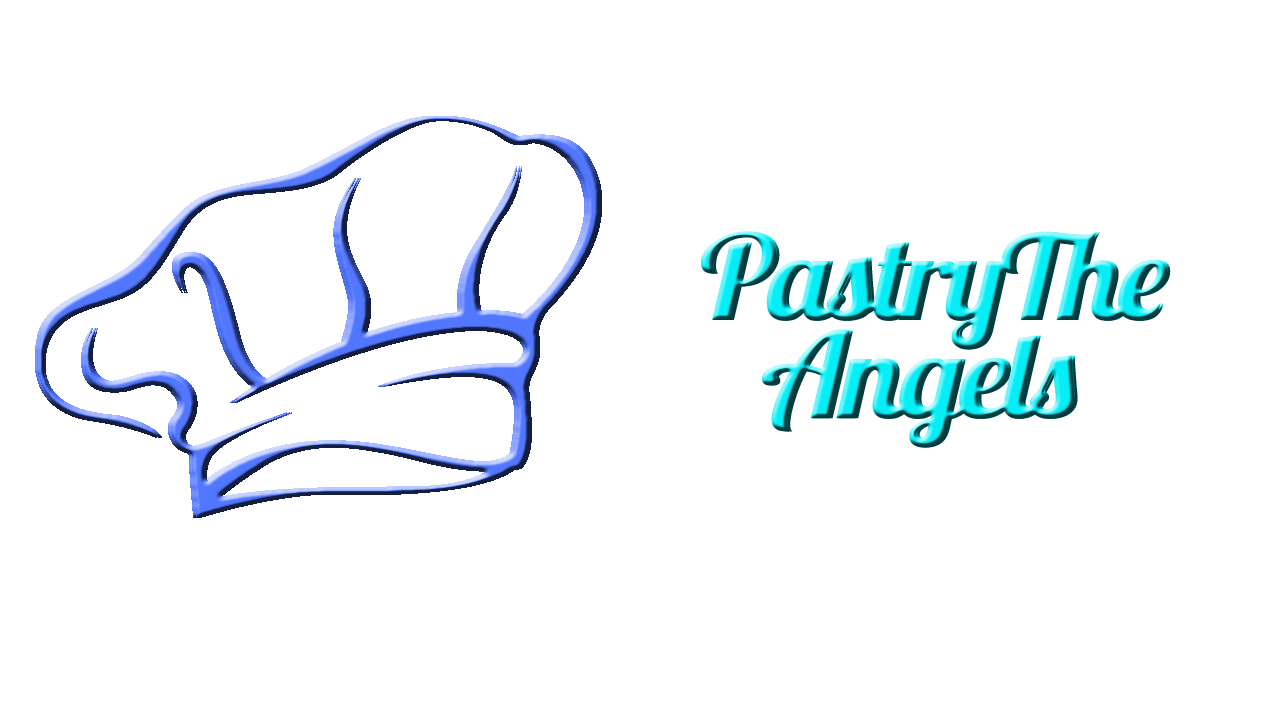
<style>
.page{position:relative;width:1280px;height:720px;background:#ffffff}
.page>*{position:absolute;margin:0}
.t1{font:117.7px/98.1px "Lobster-Regular";letter-spacing:-0.04em;scale:1.09 1}
</style>
<div class="page">
<p class="t1" style="left:701px;top:231px;width:467px;height:217px;text-align:center">PastryThe <br>Angels</p>
<p class="t1" style="left:704px;top:231px;width:467px;height:217px;text-align:center">PastryThe <br>Angels</p>
</div>
